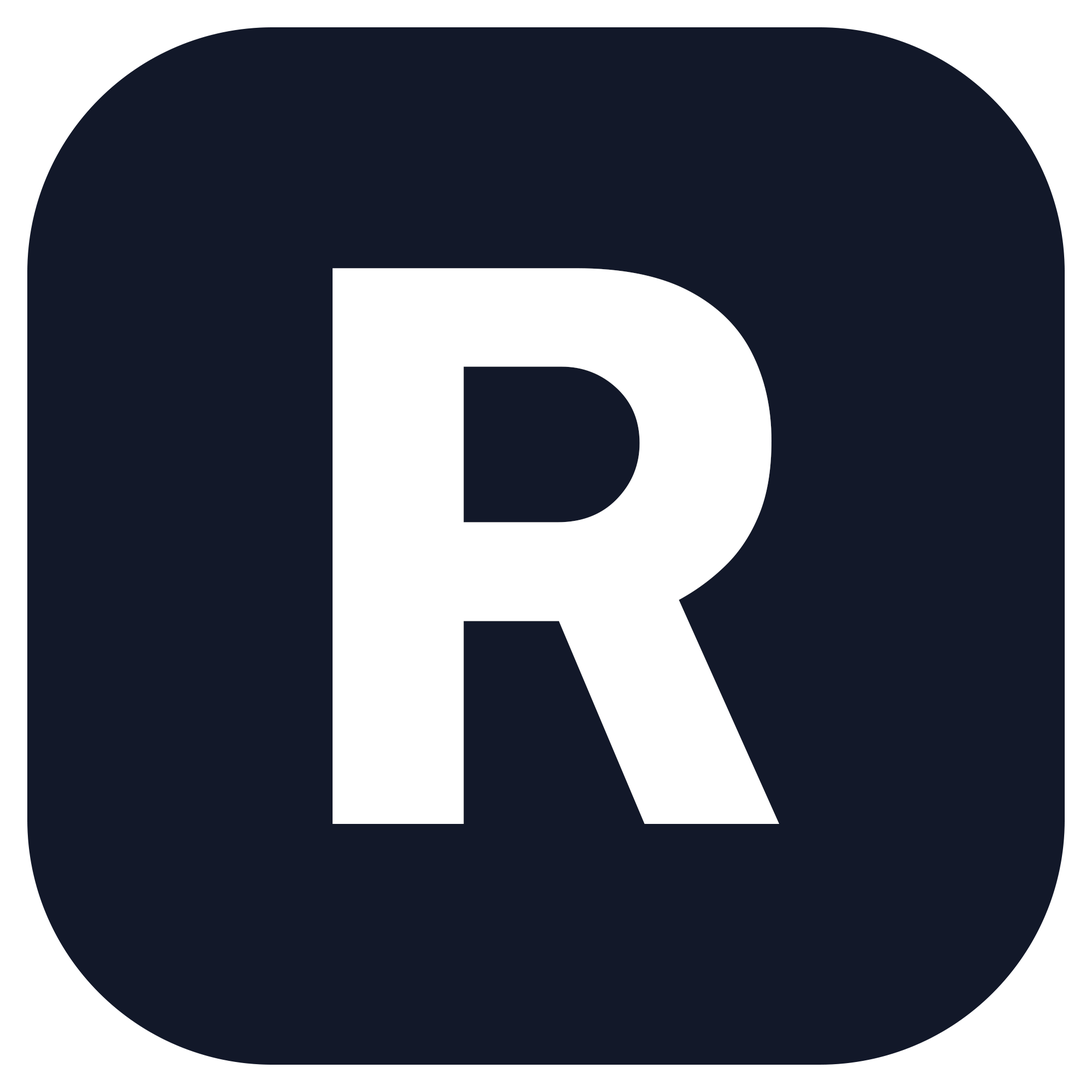
<style>
.page{position:relative;width:1092px;height:1092px;background:#121829}
.page>*{position:absolute;margin:0}
.t1{font:768.5px "PublicSans-ExtraBold";color:#ffffff}
</style>
<div class="page">
<p class="t1" style="left:333px;top:268px;width:446px;height:556px">R</p>
</div>
